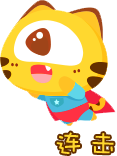
<style>
.page{position:relative;width:117px;height:156px;background:#ffffff}
.page>*{position:absolute;margin:0}
.t1{font:29.2px "DFPWaWaW5";letter-spacing:0.2em;color:#ffd82f}
</style>
<div class="page">
<p class="t1" style="left:56px;top:132px;width:58px;height:22px">连击</p>
</div>
